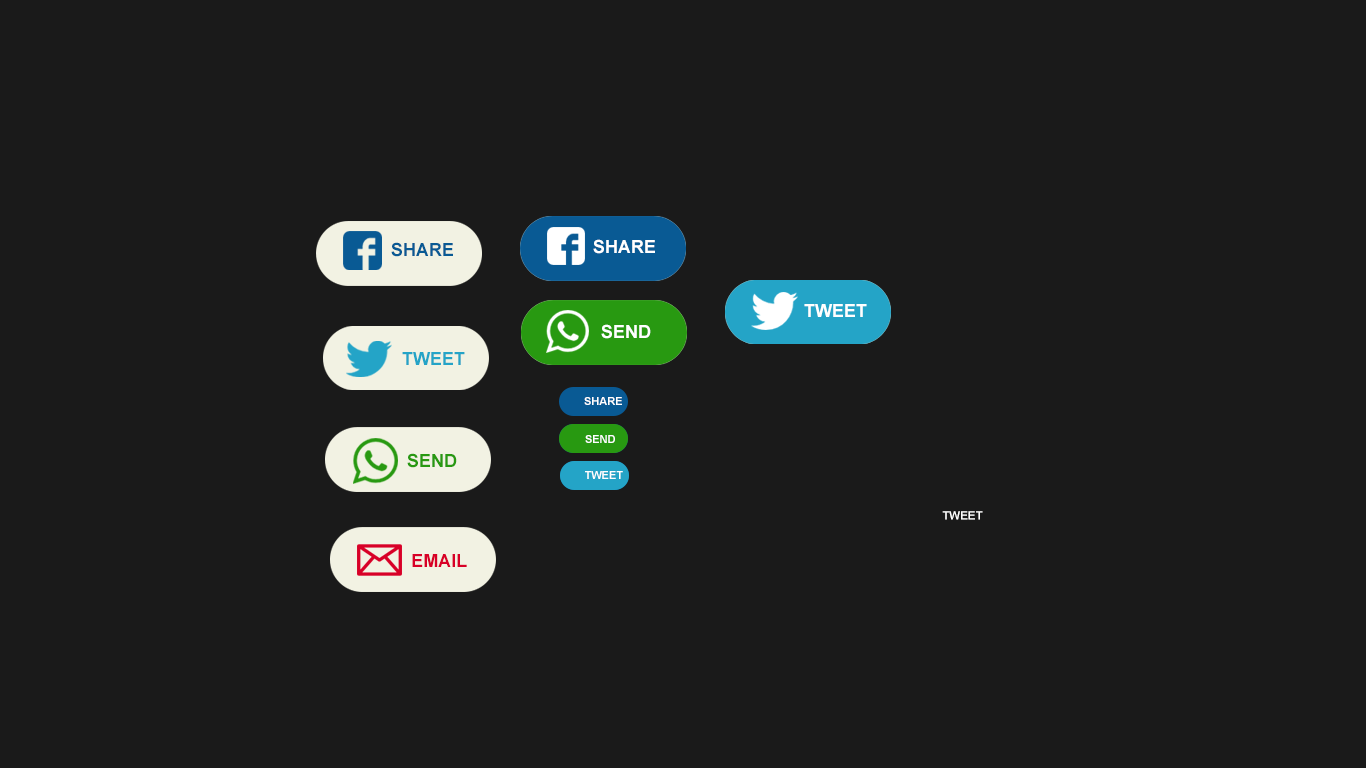
<style>
.page{position:relative;width:1366px;height:768px;background:#1a1a1a}
.page>*{position:absolute;margin:0}
.t1{font:18px "Arial-BoldMT";color:#095a94}
.t2{font:18px "Arial-BoldMT";color:#ffffff}
.t3{font:18px "Arial-BoldMT";color:#24a4c7}
.t4{font:11px "Arial-BoldMT";color:#ffffff}
.t5{font:18px "Arial-BoldMT";color:#289911}
.t6{font:11.5px "Arial-BoldMT";color:#ffffff}
.t7{font:18px "Arial-BoldMT";color:#d80027}
</style>
<div class="page">
<p class="t1" style="left:391px;top:242px;width:62px;height:15px">SHARE</p>
<p class="t2" style="left:593px;top:239px;width:62px;height:15px">SHARE</p>
<p class="t2" style="left:804px;top:304px;width:63px;height:13px">TWEET</p>
<p class="t2" style="left:601px;top:324px;width:50px;height:15px">SEND</p>
<p class="t3" style="left:402px;top:352px;width:63px;height:13px">TWEET</p>
<p class="t4" style="left:584px;top:397px;width:38px;height:8px">SHARE</p>
<p class="t4" style="left:585px;top:435px;width:30px;height:8px">SEND</p>
<p class="t5" style="left:407px;top:453px;width:50px;height:15px">SEND</p>
<p class="t4" style="left:585px;top:471px;width:38px;height:8px">TWEET</p>
<p class="t6" style="left:942px;top:511px;width:41px;height:9px">TWEET</p>
<p class="t7" style="left:412px;top:554px;width:55px;height:13px">EMAIL</p>
</div>
